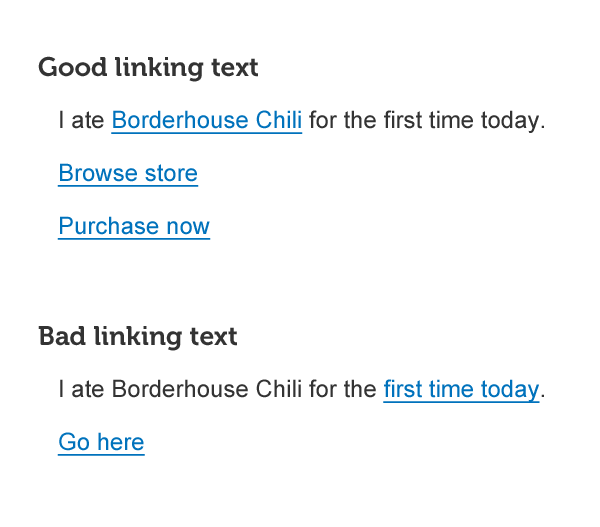
<style>
.page{position:relative;width:600px;height:527px;background:#ffffff}
.page>*{position:absolute;margin:0}
.t1{font:24px "ArialMT";color:#333333}
.t2{font:26.7px "Museo700-Regular";color:#333333}
.t3{font:24px "ArialMT";color:#0072bc;text-decoration:underline}
</style>
<div class="page">
<p class="t1" style="left:38px;top:56px;width:506px;height:400px"><span class="t2">Good linking text<br></span>I ate <span class="t3">Borderhouse Chili</span> for the first time today.<br><span class="t3">Browse store<br>Purchase now<br></span><span class="t2"><br>Bad linking text<br></span>I ate Borderhouse Chili for the <span class="t3">first time today</span>.<span class="t3"><br>Go here</span></p>
</div>
